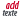
<style>
.page{position:relative;width:20px;height:20px;background:#ffffff}
.page>*{position:absolute;margin:0}
.t1{font:11.2px "MyriadPro-CondIt";color:#cd062b}
.t2{font:10px "MyriadPro-CondIt";color:#4d5157}
</style>
<div class="page">
<p class="t1" style="left:6px;top:1px;width:14px;height:8px">add</p>
<p class="t2" style="left:2px;top:10px;width:16px;height:6px">texte</p>
</div>
